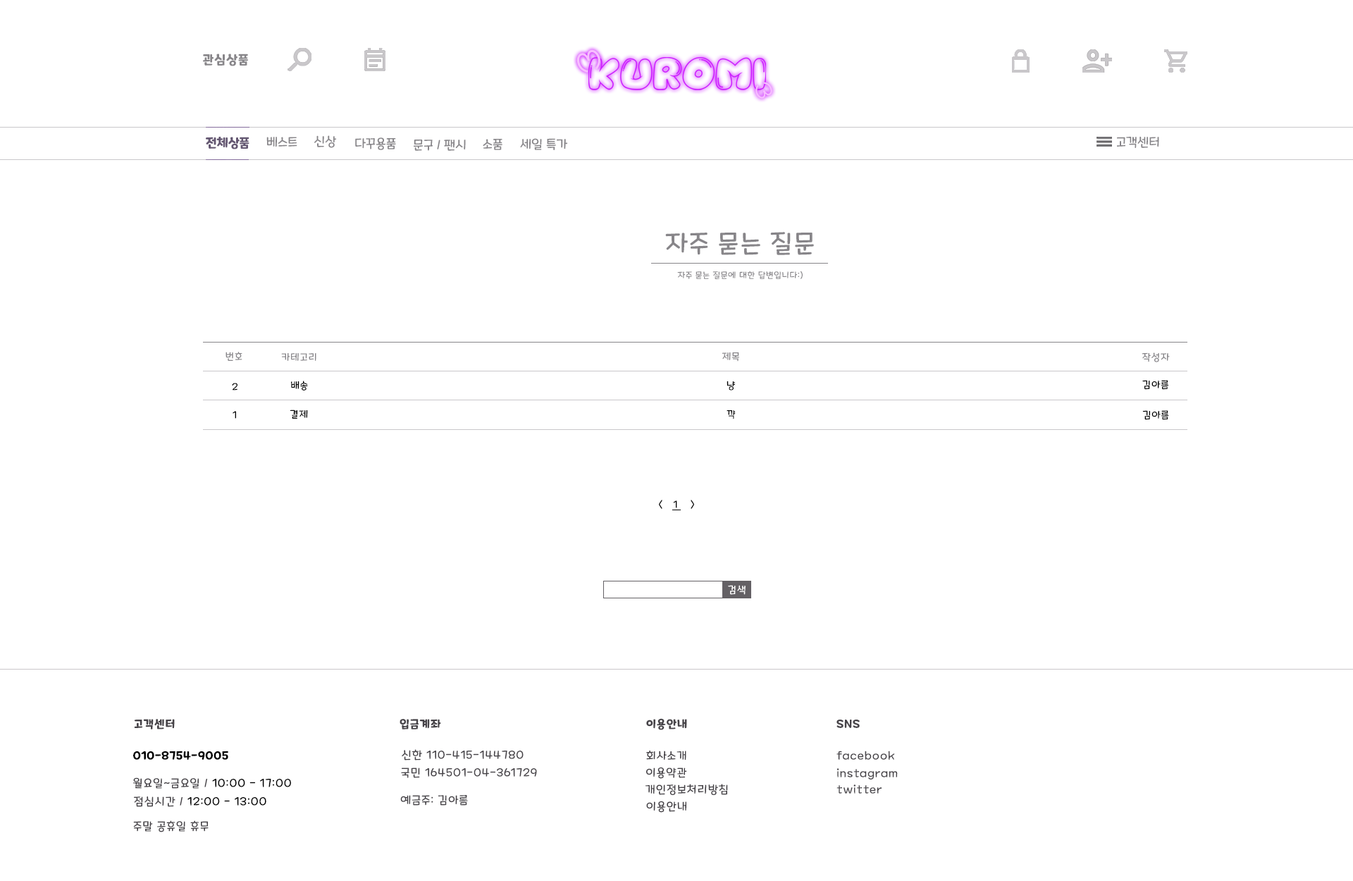
<style>
.page{position:relative;width:1353px;height:881px;background:#ffffff}
.page>*{position:absolute;margin:0}
.t1{font:12.7px "MaplestoryBold";letter-spacing:0.06em;color:#878589}
.t2{font:12.7px "MaplestoryBold";color:#645772}
.t3{font:12.7px "MaplestoryLight";color:#878589}
.t4{font:25.4px "MaplestoryLight";letter-spacing:0.06em;color:#878589}
.t5{font:8.5px "MaplestoryLight";letter-spacing:0.06em;color:#878589}
.t6{font:9.9px "MaplestoryLight";letter-spacing:0.06em;color:#878589}
.t7{font:9.9px "MaplestoryLight";letter-spacing:0.06em;color:#000000}
.t8{font:9.9px "MaplestoryLight";letter-spacing:0.06em;color:#ffffff}
.t9{font:11.3px "MaplestoryBold";letter-spacing:0.06em;color:#464348}
.t10{font:11.3px "MaplestoryLight";letter-spacing:0.06em;color:#464348}
.t11{font:11.3px "MaplestoryBold";letter-spacing:0.06em;color:#000000}
.t12{font:11.3px "MaplestoryLight";letter-spacing:0.06em;color:#000000}
</style>
<div class="page">
<p class="t1" style="left:203px;top:54px;width:45px;height:12px">관심상품</p>
<p class="t2" style="left:206px;top:137px;width:44px;height:12px">전체상품</p>
<p class="t3" style="left:266px;top:137px;width:31px;height:10px">베스트</p>
<p class="t3" style="left:314px;top:135px;width:22px;height:13px">신상</p>
<p class="t3" style="left:355px;top:137px;width:41px;height:13px">다꾸용품</p>
<p class="t3" style="left:1117px;top:137px;width:43px;height:11px">고객센터</p>
<p class="t3" style="left:414px;top:140px;width:52px;height:11px">문구 / 팬시</p>
<p class="t3" style="left:483px;top:139px;width:20px;height:11px">소품</p>
<p class="t3" style="left:520px;top:138px;width:47px;height:12px">세일 특가</p>
<p class="t4" style="left:665px;top:232px;width:149px;height:23px">자주 묻는 질문</p>
<p class="t5" style="left:677px;top:271px;width:126px;height:8px">자주 묻는 질문에 대한 답변입니다:)</p>
<p class="t6" style="left:226px;top:352px;width:16px;height:9px">번호</p>
<p class="t6" style="left:281px;top:353px;width:35px;height:8px">카테고리</p>
<p class="t6" style="left:722px;top:352px;width:17px;height:10px">제목</p>
<p class="t6" style="left:1142px;top:352px;width:28px;height:10px">작성자</p>
<p class="t7" style="left:232px;top:383px;width:6px;height:8px">2</p>
<p class="t7" style="left:291px;top:381px;width:17px;height:10px">배송</p>
<p class="t7" style="left:727px;top:381px;width:8px;height:10px">냥</p>
<p class="t7" style="left:1143px;top:380px;width:26px;height:10px">김아름</p>
<p class="t7" style="left:233px;top:411px;width:3px;height:8px">1</p>
<p class="t7" style="left:290px;top:410px;width:18px;height:9px">결제</p>
<p class="t7" style="left:727px;top:410px;width:9px;height:9px">꺅</p>
<p class="t7" style="left:1143px;top:410px;width:26px;height:10px">김아름</p>
<p class="t7" style="left:659px;top:500px;width:4px;height:9px">&lt;</p>
<p class="t7" style="left:673px;top:500px;width:4px;height:8px">1</p>
<p class="t7" style="left:691px;top:500px;width:3px;height:9px">&gt;</p>
<p class="t8" style="left:728px;top:585px;width:18px;height:10px">검색</p>
<p class="t9" style="left:134px;top:719px;width:41px;height:11px">고객센터</p>
<p class="t9" style="left:400px;top:719px;width:41px;height:11px">입금계좌</p>
<p class="t9" style="left:646px;top:718px;width:41px;height:12px">이용안내</p>
<p class="t9" style="left:837px;top:720px;width:23px;height:8px">SNS</p>
<p class="t10" style="left:402px;top:749px;width:122px;height:12px">신한 110-415-144780</p>
<p class="t11" style="left:133px;top:751px;width:95px;height:9px">010-8754-9005</p>
<p class="t10" style="left:646px;top:751px;width:41px;height:9px">회사소개</p>
<p class="t10" style="left:837px;top:751px;width:58px;height:9px">facebook</p>
<p class="t10" style="left:401px;top:768px;width:136px;height:10px">국민 164501-04-361729</p>
<p class="t10" style="left:646px;top:767px;width:41px;height:12px">이용약관</p>
<p class="t10" style="left:837px;top:768px;width:61px;height:12px">instagram</p>
<p class="t12" style="left:133px;top:777px;width:158px;height:12px"><span class="t10">월요일~금요일 / </span>10:00 - 17:00</p>
<p class="t10" style="left:646px;top:784px;width:82px;height:11px">개인정보처리방침</p>
<p class="t10" style="left:837px;top:785px;width:46px;height:9px">twitter</p>
<p class="t12" style="left:134px;top:797px;width:132px;height:10px"><span class="t10">점심시간 / </span>12:00 - 13:00</p>
<p class="t10" style="left:400px;top:795px;width:68px;height:11px">예금주: 김아름</p>
<p class="t10" style="left:646px;top:801px;width:41px;height:12px">이용안내</p>
<p class="t10" style="left:133px;top:820px;width:76px;height:12px">주말 공휴일 휴무</p>
</div>
